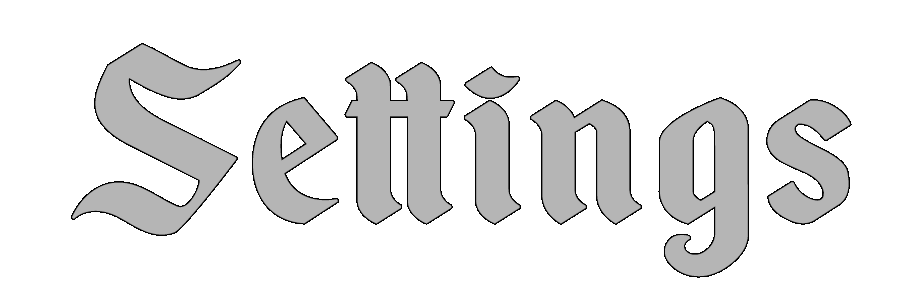
<style>
.page{position:relative;width:923px;height:300px;background:#ffffff}
.page>*{position:absolute;margin:0}
.t1{font:283.3px "EnchantedLand";color:#b5b5b5;font-weight:bold;scale:1.18 1}
</style>
<div class="page">
<p class="t1" style="left:72px;top:44px;width:779px;height:233px">Settings</p>
</div>
